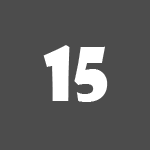
<style>
.page{position:relative;width:150px;height:150px;background:#4c4c4c}
.page>*{position:absolute;margin:0}
.t1{font:72px "ShowcardGothic-Reg";color:#ffffff}
</style>
<div class="page">
<p class="t1" style="left:43px;top:45px;width:65px;height:57px">15</p>
</div>
